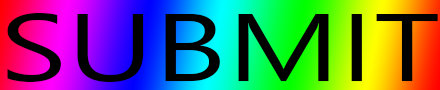
<style>
.page{position:relative;width:440px;height:90px;background:#000000}
.page>*{position:absolute;margin:0}
.t1{font:96px "SegoeUISymbol";color:#000000;scale:1.32 1}
</style>
<div class="page">
<p class="t1" style="left:7px;top:13px;width:431px;height:69px">SUBMIT</p>
</div>
